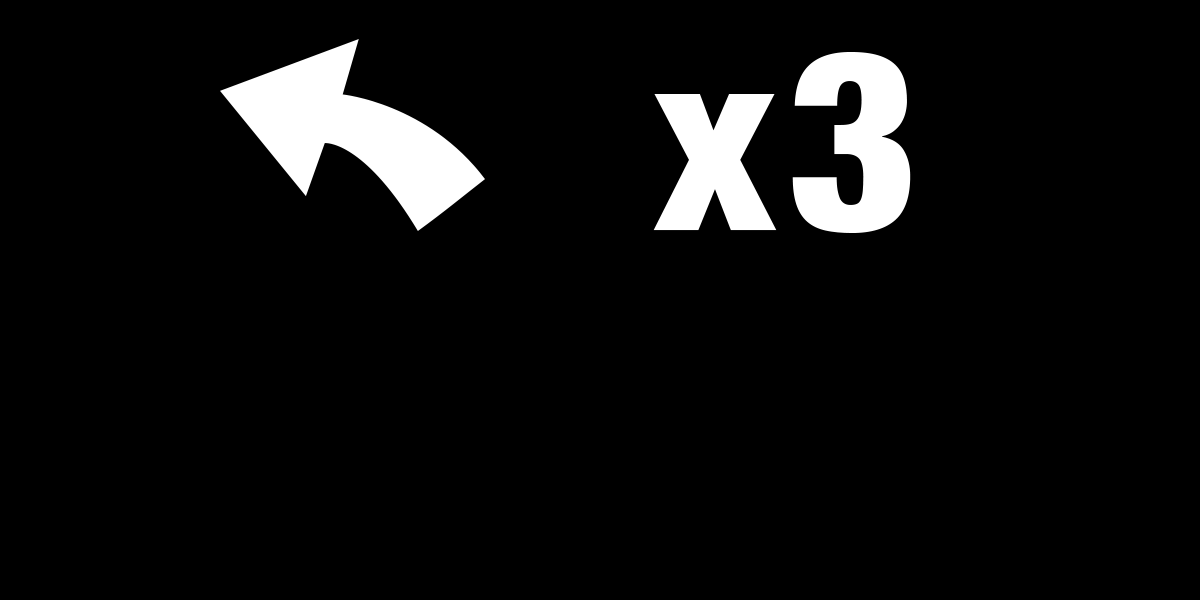
<style>
.page{position:relative;width:1200px;height:600px;background:#000000}
.page>*{position:absolute;margin:0}
.t1{font:252.3px "HelveticaNeue-CondensedBlack";letter-spacing:0.05em;color:#ffffff}
</style>
<div class="page">
<p class="t1" style="left:653px;top:52px;width:258px;height:181px">x3</p>
</div>
